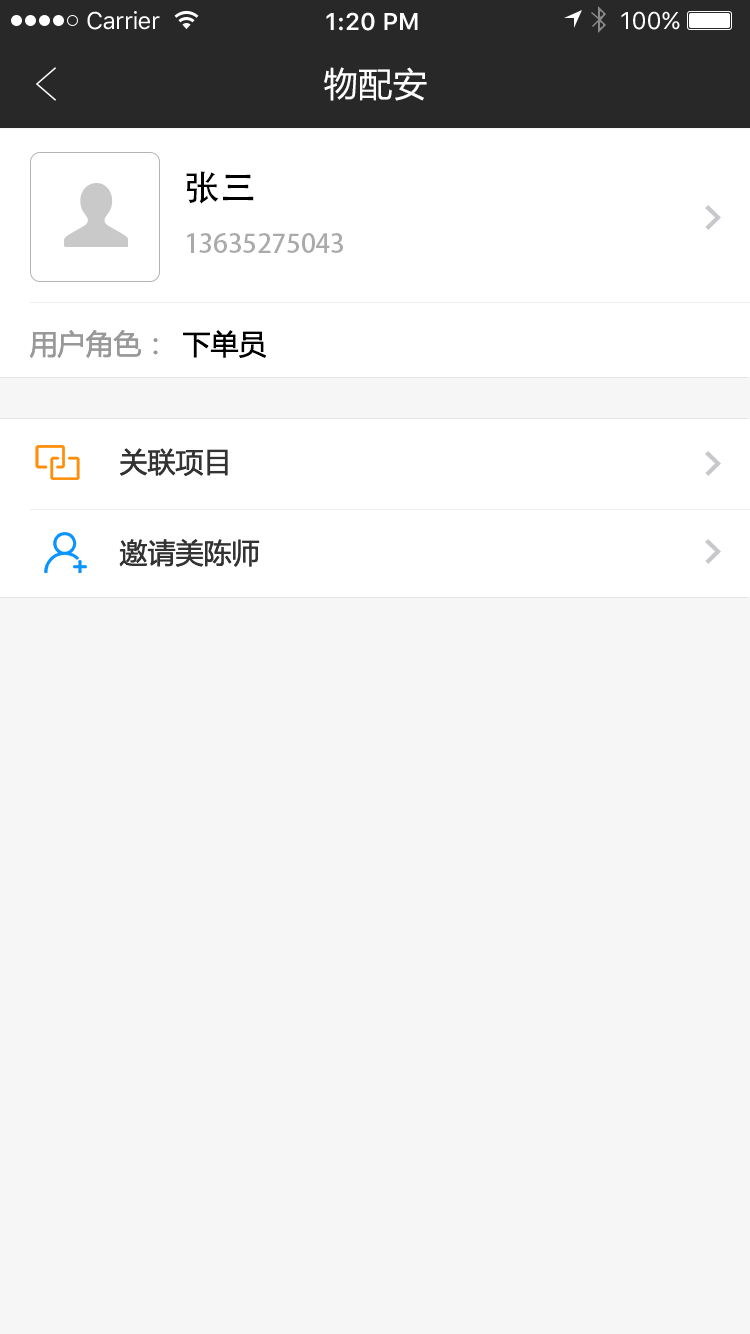
<style>
.page{position:relative;width:750px;height:1334px;background:#f6f6f6}
.page>*{position:absolute;margin:0}
.t1{font:24px "SFUIText-Regular";letter-spacing:-0.025em;color:#ffffff}
.t2{font:24px "SFUIText-Semibold";color:#ffffff}
.t3{font:24px "SFUIText-Regular";color:#ffffff}
.t4{font:34px "MicrosoftYaHei";letter-spacing:0.02em;color:#ffffff}
.t5{font:36px "AdobeHeitiStd-Regular";color:#000000}
.t6{font:26px "AdobeHeitiStd-Regular";color:#aaaaaa}
.t7{font:28px "MicrosoftYaHei";color:#999999}
.t8{font:28px "MicrosoftYaHei";color:#000000}
.t9{font:28px "MicrosoftYaHei";color:#333333}
</style>
<div class="page">
<p class="t1" style="left:87px;top:11px;width:73px;height:19px">Carrier</p>
<p class="t2" style="left:326px;top:12px;width:92px;height:19px">1:20 PM</p>
<p class="t3" style="left:621px;top:11px;width:59px;height:19px">100%</p>
<p class="t4" style="left:324px;top:67px;width:103px;height:34px">物配安</p>
<p class="t5" style="left:186px;top:171px;width:68px;height:33px">张三</p>
<p class="t6" style="left:187px;top:233px;width:156px;height:20px">13635275043</p>
<p class="t7" style="left:30px;top:330px;width:128px;height:28px">用户角色：</p>
<p class="t8" style="left:183px;top:330px;width:84px;height:28px">下单员</p>
<p class="t9" style="left:120px;top:448px;width:108px;height:28px">关联项目</p>
<p class="t9" style="left:119px;top:539px;width:141px;height:28px">邀请美陈师</p>
</div>
